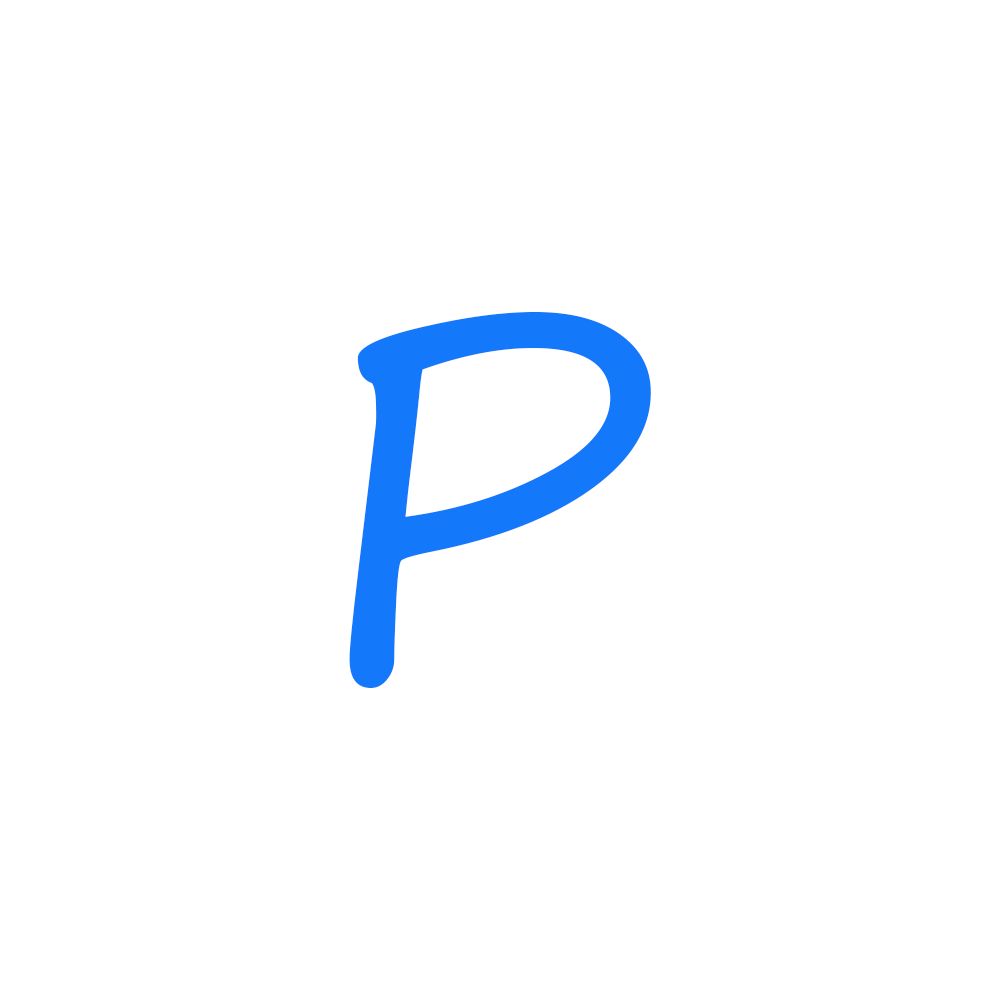
<style>
.page{position:relative;width:1000px;height:1000px;background:#ffffff}
.page>*{position:absolute;margin:0}
.t1{font:500px "SegoePrint";color:#1478fa}
</style>
<div class="page">
<p class="t1" style="left:349px;top:312px;width:302px;height:376px">P</p>
</div>
